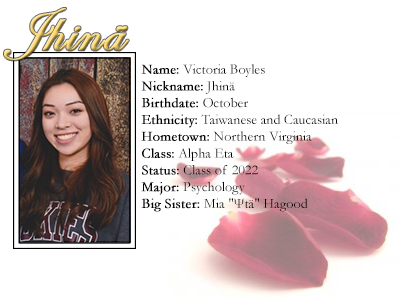
<style>
.page{position:relative;width:400px;height:300px;background:#ffffff}
.page>*{position:absolute;margin:0}
.t1{font:60px "EdwardianScriptITC";font-weight:bold}
.t2{font:14px "Garamond";color:#000000}
.t3{font:14px "Garamond";color:#000000;font-weight:bold}
</style>
<div class="page">
<p class="t1" style="left:4px;top:8px;width:125px;height:53px">Jhinä</p>
<p class="t2" style="left:141px;top:64px;width:197px;height:148px"><span class="t3">Name:</span> Victoria Boyles<br><span class="t3">Nickname:</span> Jhinä<br><span class="t3">Birthdate:</span> October<br><span class="t3">Ethnicity:</span> Taiwanese and Caucasian<br><span class="t3">Hometown:</span> Northern Virginia<br><span class="t3">Class:</span> Alpha Eta<br><span class="t3">Status:</span> Class of 2022<br><span class="t3">Major:</span> Psychology<br><span class="t3">Big Sister: </span>Mia "Ψtä" Hagood</p>
</div>
